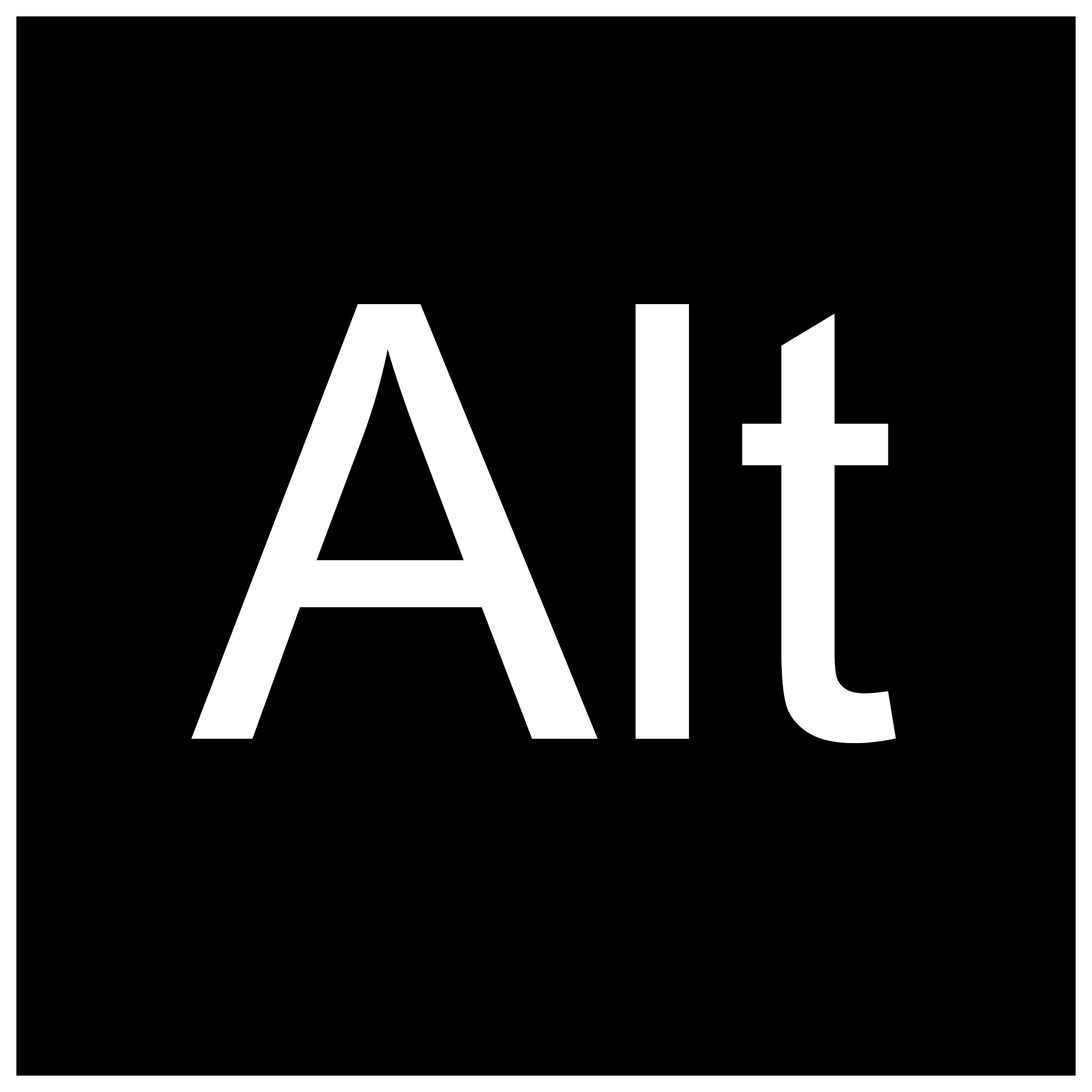
<style>
.page{position:relative;width:1092px;height:1092px;background:#000000}
.page>*{position:absolute;margin:0}
.t1{font:606.7px "ArialMT";color:#ffffff}
</style>
<div class="page">
<p class="t1" style="left:191px;top:304px;width:705px;height:439px">Alt</p>
</div>
